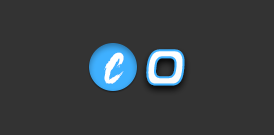
<style>
.page{position:relative;width:274px;height:135px;background:#333333}
.page>*{position:absolute;margin:0}
.t1{font:8.2px "AnotherDangerDemo";color:#ffffff}
.t2{font:51.5px "!PEPSI!"}
</style>
<div class="page">
<p class="t1" style="left:104px;top:52px;width:20px;height:32px">c</p>
<p class="t2" style="left:146px;top:49px;width:39px;height:37px">0</p>
</div>
